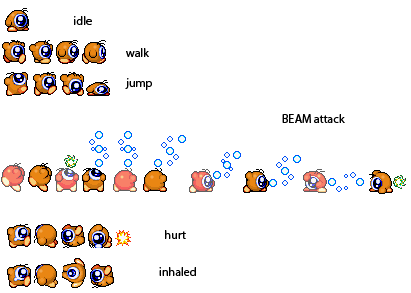
<style>
.page{position:relative;width:411px;height:293px;background:#ffffff}
.page>*{position:absolute;margin:0}
.t1{font:12px "MyriadPro-Regular";color:#000000}
</style>
<div class="page">
<p class="t1" style="left:74px;top:16px;width:18px;height:9px">idle</p>
<p class="t1" style="left:126px;top:48px;width:23px;height:9px">walk</p>
<p class="t1" style="left:125px;top:78px;width:27px;height:12px">jump</p>
<p class="t1" style="left:282px;top:114px;width:63px;height:9px">BEAM attack</p>
<p class="t1" style="left:165px;top:230px;width:21px;height:9px">hurt</p>
<p class="t1" style="left:159px;top:267px;width:37px;height:9px">inhaled</p>
</div>
